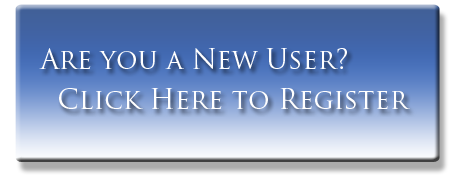
<style>
.page{position:relative;width:459px;height:178px}
.page>*{position:absolute;margin:0}
.t1{font:26.8px/40px "TrajanPro-Regular";color:#ffffff;font-variant:small-caps}
</style>
<div class="page">
<p class="t1" style="left:39px;top:48px;width:371px;height:61px">Are you a New User?<br>  Click Here to Register</p>
</div>
